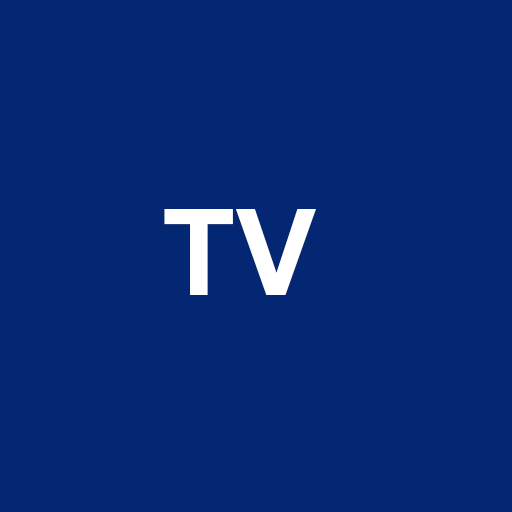
<style>
.page{position:relative;width:512px;height:512px;background:#042774}
.page>*{position:absolute;margin:0}
.t1{font:120px "Arial-BoldMT";color:#ffffff}
</style>
<div class="page">
<p class="t1" style="left:164px;top:209px;width:152px;height:86px">TV</p>
</div>
